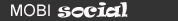
<style>
.page{position:relative;width:178px;height:21px;background:#333333}
.page>*{position:absolute;margin:0}
.t1{font:18px "Raavi";color:#fdf9fa}
.t2{font:18px "Ravie";color:#fdf9fa}
</style>
<div class="page">
<p class="t1" style="left:11px;top:4px;width:39px;height:13px">MOBI</p>
<p class="t2" style="left:57px;top:2px;width:71px;height:16px">social</p>
</div>
